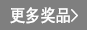
<style>
.page{position:relative;width:87px;height:30px;background:#7f7f7f}
.page>*{position:absolute;margin:0}
.t1{font:17.3px "SimHei";letter-spacing:-0.025em;color:#ffffff;scale:0.9 1}
</style>
<div class="page">
<p class="t1" style="left:10px;top:7px;width:68px;height:17px">更多奖品&gt;</p>
</div>
